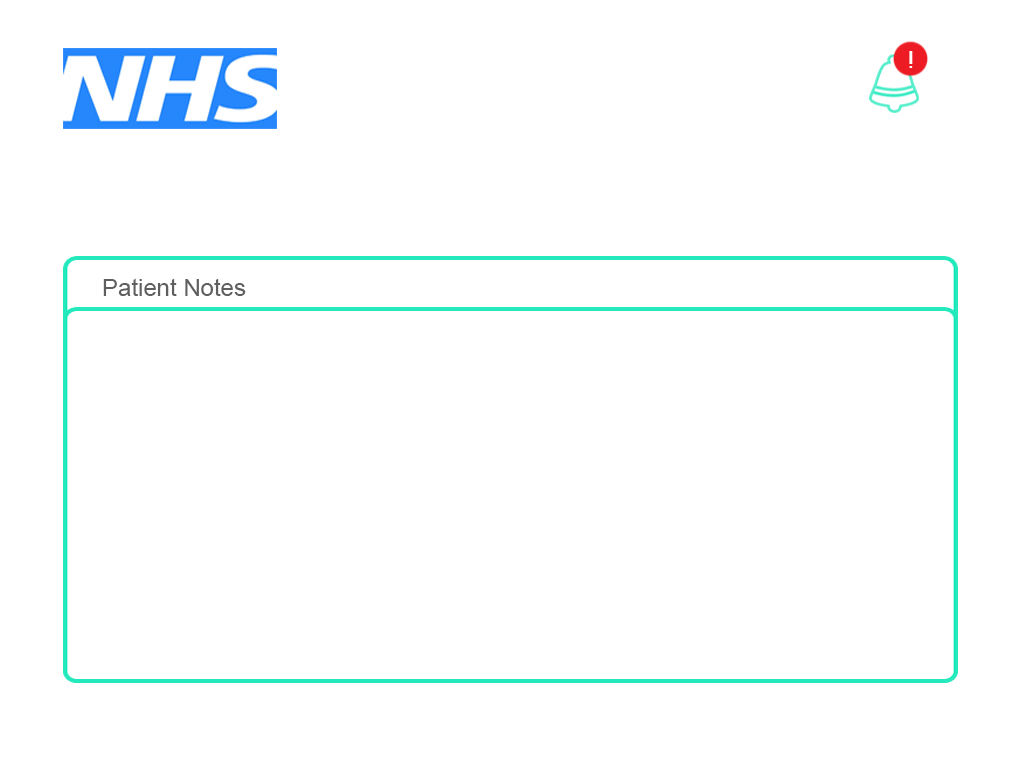
<style>
.page{position:relative;width:1024px;height:768px;background:#ffffff}
.page>*{position:absolute;margin:0}
.t1{font:24px "ArialMT";color:#5f5f5f}
</style>
<div class="page">
<p class="t1" style="left:103px;top:278px;width:143px;height:18px">Patient Notes</p>
</div>
